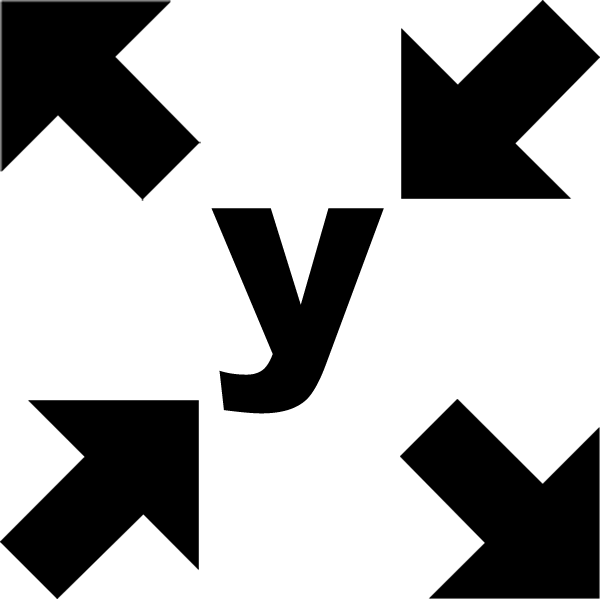
<style>
.page{position:relative;width:600px;height:599px;background:#ffffff}
.page>*{position:absolute;margin:0}
.t1{font:281.2px "Arial-Black";letter-spacing:0.02em;color:#000000}
</style>
<div class="page">
<p class="t1" style="left:211px;top:208px;width:173px;height:206px">y</p>
</div>
